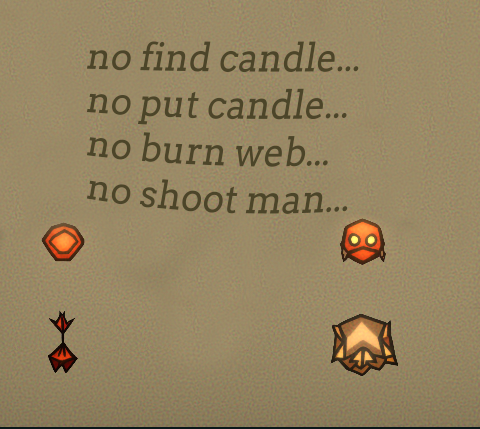
<style>
.page{position:relative;width:480px;height:429px}
.page>*{position:absolute;margin:0}
.t1{font:36px "Arvo";color:#4c4529;font-style:italic}
</style>
<div class="page">
<p class="t1" style="left:86px;top:41px;width:273px;height:173px">no find candle...<br>no put candle...<br>no burn web...<br>no shoot man...</p>
</div>
